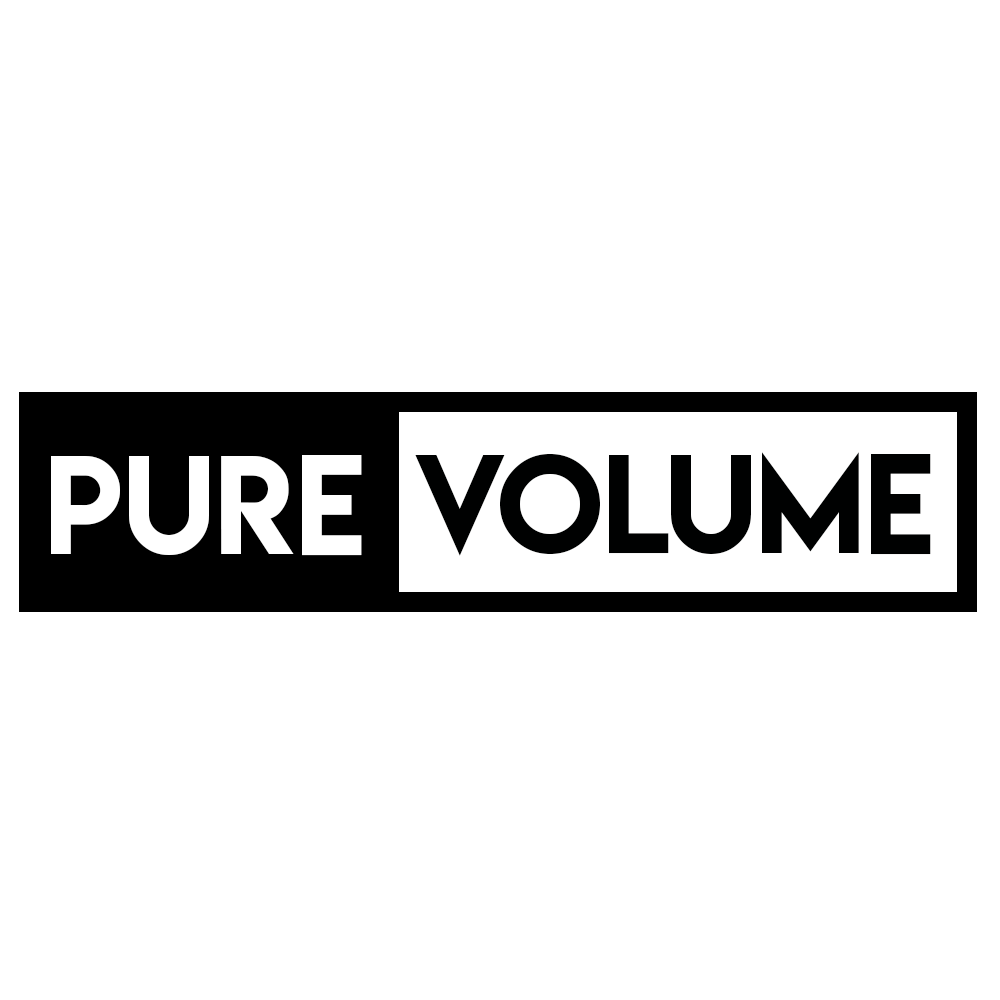
<style>
.page{position:relative;width:1000px;height:1000px;background:#ffffff}
.page>*{position:absolute;margin:0}
.t1{font:125px "LemonMilk";color:#ffffff}
.t2{font:125px "LemonMilk";color:#000101}
</style>
<div class="page">
<p class="t1" style="left:51px;top:455px;width:311px;height:101px">Pure</p>
<p class="t2" style="left:415px;top:452px;width:516px;height:104px">volume</p>
</div>
